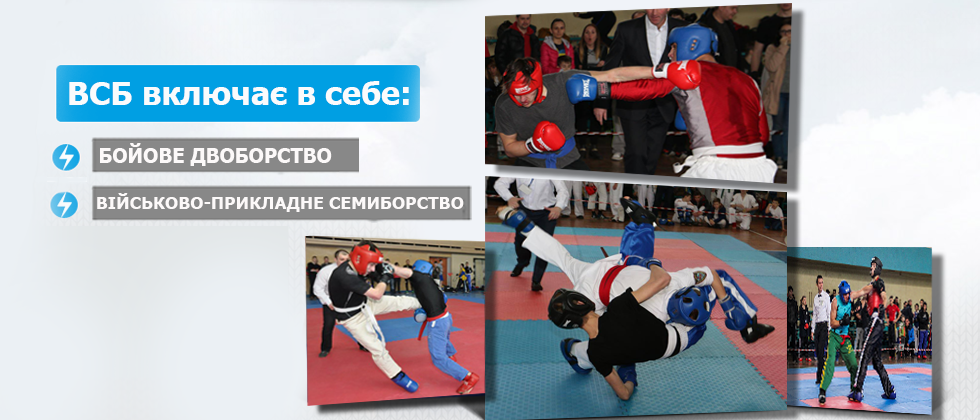
<style>
.page{position:relative;width:980px;height:420px}
.page>*{position:absolute;margin:0}
.t1{font:32px "Tahoma-Bold";color:#fafbfc}
.t2{font:20px "Tahoma-Bold";color:#fcf9f9}
.t3{font:17.3px "Tahoma-Bold";color:#fcf9f9}
</style>
<div class="page">
<p class="t1" style="left:69px;top:81px;width:340px;height:24px">ВСБ включає в себе:</p>
<p class="t2" style="left:100px;top:143px;width:232px;height:23px">БОЙОВЕ ДВОБОРСТВО</p>
<p class="t3" style="left:97px;top:193px;width:367px;height:19px">ВІЙСЬКОВО-ПРИКЛАДНЕ СЕМИБОРСТВО</p>
</div>
